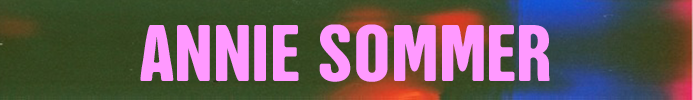
<style>
.page{position:relative;width:693px;height:100px}
.page>*{position:absolute;margin:0}
.t1{font:84.2px "HectorRounded";color:#ff99ff;scale:1.1 1}
</style>
<div class="page">
<p class="t1" style="left:140px;top:24px;width:410px;height:58px">ANNIE SOMMER</p>
</div>
